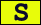
<style>
.page{position:relative;width:41px;height:25px;background:#e8fc0a}
.page>*{position:absolute;margin:0}
.t1{font:28px "CourierNewPS-BoldMT";color:#0c092c}
</style>
<div class="page">
<p class="t1" style="left:14px;top:3px;width:14px;height:18px">S</p>
</div>
